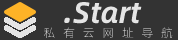
<style>
.page{position:relative;width:178px;height:40px;background:#333333}
.page>*{position:absolute;margin:0}
.t1{font:30px "AlibabaSans-BoldItalic";color:#e5e5e5}
.t2{font:11.9px "AlibabaPuHuiTi-Light";letter-spacing:0.66em}
</style>
<div class="page">
<p class="t1" style="left:64px;top:2px;width:78px;height:22px">.Start</p>
<p class="t2" style="left:44px;top:27px;width:129px;height:12px">私有云网址导航</p>
</div>
